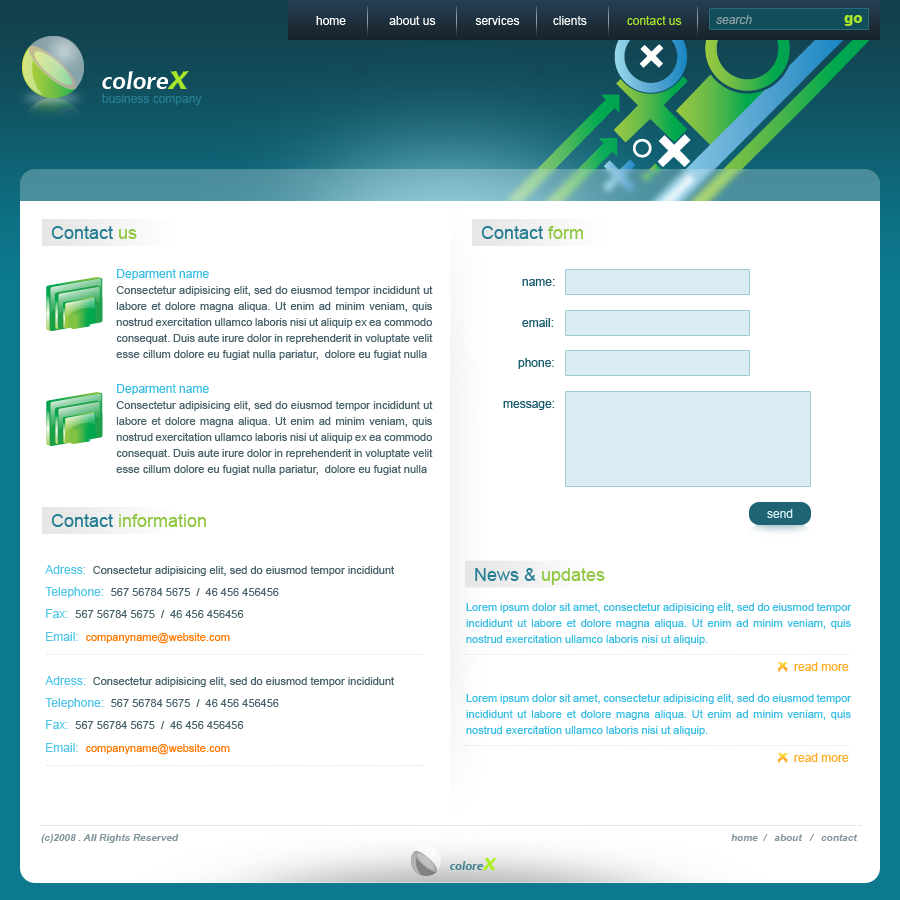
<style>
.page{position:relative;width:900px;height:900px;background:#ffffff}
.page>*{position:absolute;margin:0}
.t1{font:12px "ArialMT";color:#fffffe}
.t2{font:12px "ArialMT";color:#a9e528}
.t3{font:12px "Arial-ItalicMT";color:#90a3a7}
.t4{font:14px "Arial-Black";color:#a9e528}
.t5{font:24px "ChiantiBT-BoldItalic";color:#ffffff}
.t6{font:36px "ChiantiBT-BoldItalic";color:#a9e528}
.t7{font:12px "ArialMT";color:#257e92}
.t8{font:18px "ArialMT";color:#257e92}
.t9{font:18px "ArialMT";color:#91c742}
.t10{font:11px/16px "ArialMT";color:#48636b}
.t11{font:12px/16px "ArialMT";color:#39bee5}
.t12{font:12px "ArialMT";color:#175b6c}
.t13{font:12px "ArialMT";color:#d9f0f5}
.t14{font:11px "ArialMT";color:#48636b}
.t15{font:12px "ArialMT";color:#52c6e8}
.t16{font:11px/16px "ArialMT";color:#39bee5}
.t17{font:11px "ArialMT";color:#ff7800}
.t18{font:12px "ArialMT";color:#ffaa20}
.t19{font:10px "Arial-BoldItalicMT";color:#82969b}
.t20{font:12px "ChiantiBT-BoldItalic";color:#408190}
.t21{font:24px "ChiantiBT-BoldItalic";color:#abf017}
</style>
<div class="page">
<p class="t1" style="left:316px;top:16px;width:366px;height:9px">home             about us            services          clients           <span class="t2"> contact us</span></p>
<p class="t3" style="left:716px;top:15px;width:36px;height:9px">search</p>
<p class="t4" style="left:844px;top:15px;width:19px;height:11px">go</p>
<p class="t5" style="left:102px;top:71px;width:87px;height:18px">colore<span class="t6">x</span></p>
<p class="t7" style="left:102px;top:94px;width:100px;height:11px">business company</p>
<p class="t8" style="left:51px;top:226px;width:86px;height:13px">Contact <span class="t9">us</span></p>
<p class="t8" style="left:481px;top:226px;width:102px;height:13px">Contact <span class="t9">form</span></p>
<p class="t10" style="left:116px;top:269px;width:317px;height:91px;text-align:justify"><span class="t11">Deparment name<br></span>Consectetur adipisicing elit, sed do eiusmod tempor incididunt ut labore et dolore magna aliqua. Ut enim ad minim veniam, quis nostrud exercitation ullamco laboris nisi ut aliquip ex ea commodo consequat. Duis aute irure dolor in reprehenderit in voluptate velit esse cillum dolore eu fugiat nulla pariatur,  dolore eu fugiat nulla</p>
<p class="t12" style="left:522px;top:279px;width:33px;height:7px">name:</p>
<p class="t12" style="left:522px;top:318px;width:32px;height:9px">email:</p>
<p class="t12" style="left:518px;top:358px;width:36px;height:11px">phone:</p>
<p class="t10" style="left:116px;top:384px;width:317px;height:91px;text-align:justify"><span class="t11">Deparment name<br></span>Consectetur adipisicing elit, sed do eiusmod tempor incididunt ut labore et dolore magna aliqua. Ut enim ad minim veniam, quis nostrud exercitation ullamco laboris nisi ut aliquip ex ea commodo consequat. Duis aute irure dolor in reprehenderit in voluptate velit esse cillum dolore eu fugiat nulla pariatur,  dolore eu fugiat nulla</p>
<p class="t12" style="left:503px;top:401px;width:52px;height:9px">message:</p>
<p class="t13" style="left:767px;top:509px;width:26px;height:9px">send</p>
<p class="t9" style="left:51px;top:514px;width:155px;height:13px"><span class="t8">Contact </span>information</p>
<p class="t14" style="left:45px;top:565px;width:349px;height:11px"><span class="t15">Adress:  </span>Consectetur adipisicing elit, sed do eiusmod tempor incididunt</p>
<p class="t9" style="left:475px;top:568px;width:130px;height:17px"><span class="t8">News &amp; </span>updates</p>
<p class="t14" style="left:45px;top:587px;width:234px;height:11px"><span class="t15">Telephone:  </span>567 56784 5675  /  46 456 456456</p>
<p class="t16" style="left:466px;top:603px;width:386px;height:42px;text-align:justify">Lorem ipsum dolor sit amet, consectetur adipisicing elit, sed do eiusmod tempor incididunt ut labore et dolore magna aliqua. Ut enim ad minim veniam, quis nostrud exercitation ullamco laboris nisi ut aliquip.</p>
<p class="t14" style="left:46px;top:609px;width:198px;height:9px"><span class="t15">Fax:  </span>567 56784 5675  /  46 456 456456</p>
<p class="t17" style="left:46px;top:632px;width:184px;height:12px"><span class="t15">Email:  </span>companyname@website.com</p>
<p class="t18" style="left:794px;top:662px;width:55px;height:9px">read more</p>
<p class="t14" style="left:45px;top:676px;width:349px;height:11px"><span class="t15">Adress:  </span>Consectetur adipisicing elit, sed do eiusmod tempor incididunt</p>
<p class="t14" style="left:45px;top:698px;width:234px;height:11px"><span class="t15">Telephone:  </span>567 56784 5675  /  46 456 456456</p>
<p class="t16" style="left:466px;top:694px;width:386px;height:42px;text-align:justify">Lorem ipsum dolor sit amet, consectetur adipisicing elit, sed do eiusmod tempor incididunt ut labore et dolore magna aliqua. Ut enim ad minim veniam, quis nostrud exercitation ullamco laboris nisi ut aliquip.</p>
<p class="t14" style="left:46px;top:720px;width:198px;height:9px"><span class="t15">Fax:  </span>567 56784 5675  /  46 456 456456</p>
<p class="t17" style="left:46px;top:743px;width:184px;height:12px"><span class="t15">Email:  </span>companyname@website.com</p>
<p class="t18" style="left:794px;top:753px;width:55px;height:9px">read more</p>
<p class="t19" style="left:41px;top:834px;width:138px;height:9px">(c)2008 . All Rights Reserved</p>
<p class="t19" style="left:731px;top:834px;width:127px;height:7px">home  /   about   /   contact</p>
<p class="t20" style="left:450px;top:858px;width:47px;height:12px">colore<span class="t21">x</span></p>
</div>
